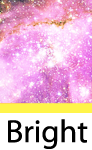
<style>
.page{position:relative;width:92px;height:150px}
.page>*{position:absolute;margin:0}
.t1{font:32.3px "MyriadPro-Regular";color:#000000}
</style>
<div class="page">
<p class="t1" style="left:8px;top:119px;width:80px;height:30px">Bright</p>
</div>
